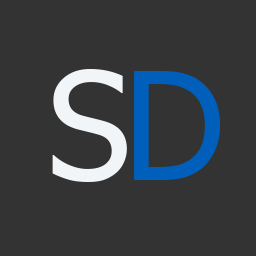
<style>
.page{position:relative;width:256px;height:256px;background:#333333}
.page>*{position:absolute;margin:0}
.t1{font:150px "Tahoma";letter-spacing:-0.05em;color:#f2f5f7}
.t2{font:150px "Tahoma";letter-spacing:-0.05em;color:#005fbb}
</style>
<div class="page">
<p class="t1" style="left:52px;top:69px;width:169px;height:113px">S<span class="t2">D</span></p>
</div>
